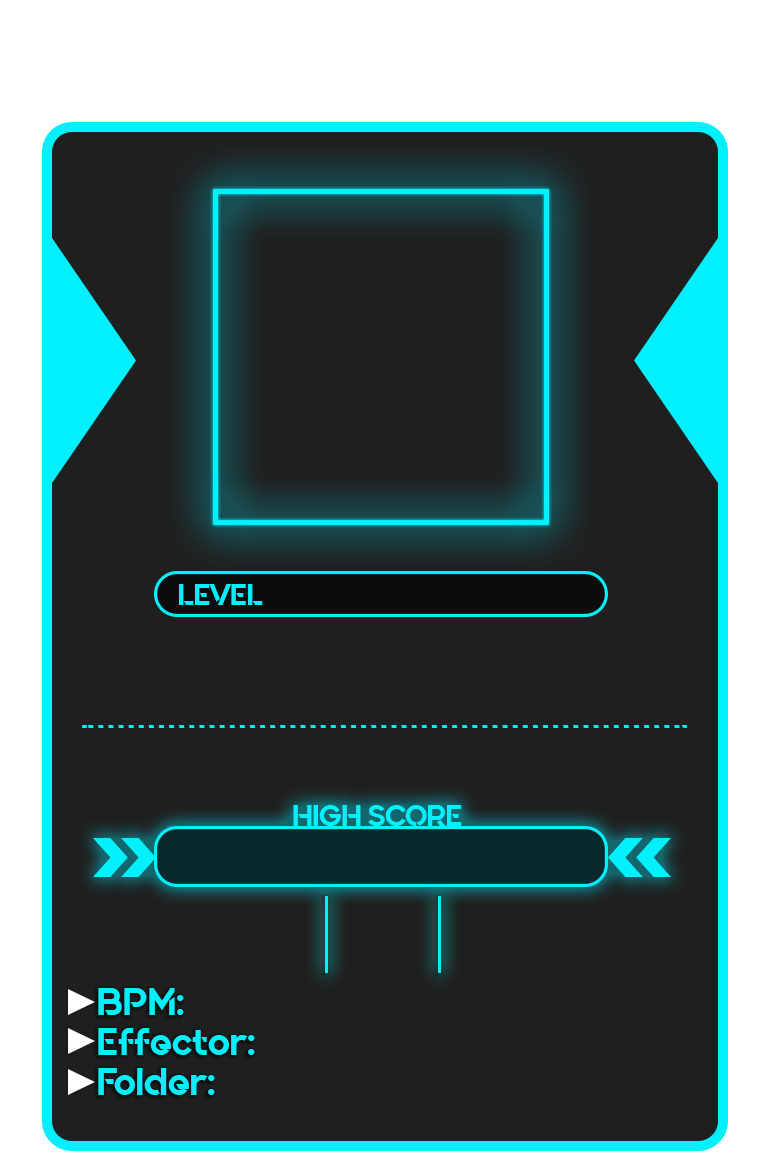
<style>
.page{position:relative;width:761px;height:1175px;background:#1f1f1f}
.page>*{position:absolute;margin:0}
.t1{font:30px "Quantify";color:#00f0ff}
.t2{font:39.4px/40px "Quantify";color:#00f0ff}
</style>
<div class="page">
<p class="t1" style="left:179px;top:584px;width:84px;height:21px">LEVEL</p>
<p class="t1" style="left:293px;top:805px;width:169px;height:21px">HIGH SCORE</p>
<p class="t2" style="left:98px;top:988px;width:157px;height:107px">BPM:<br>Effector: <br>Folder:</p>
</div>
